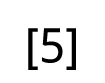
<style>
.page{position:relative;width:105px;height:83px;background:#ffffff}
.page>*{position:absolute;margin:0}
.t1{font:47.9px "DroidSans";color:#000000}
</style>
<div class="page">
<p class="t1" style="left:28px;top:28px;width:48px;height:42px">[5]</p>
</div>
